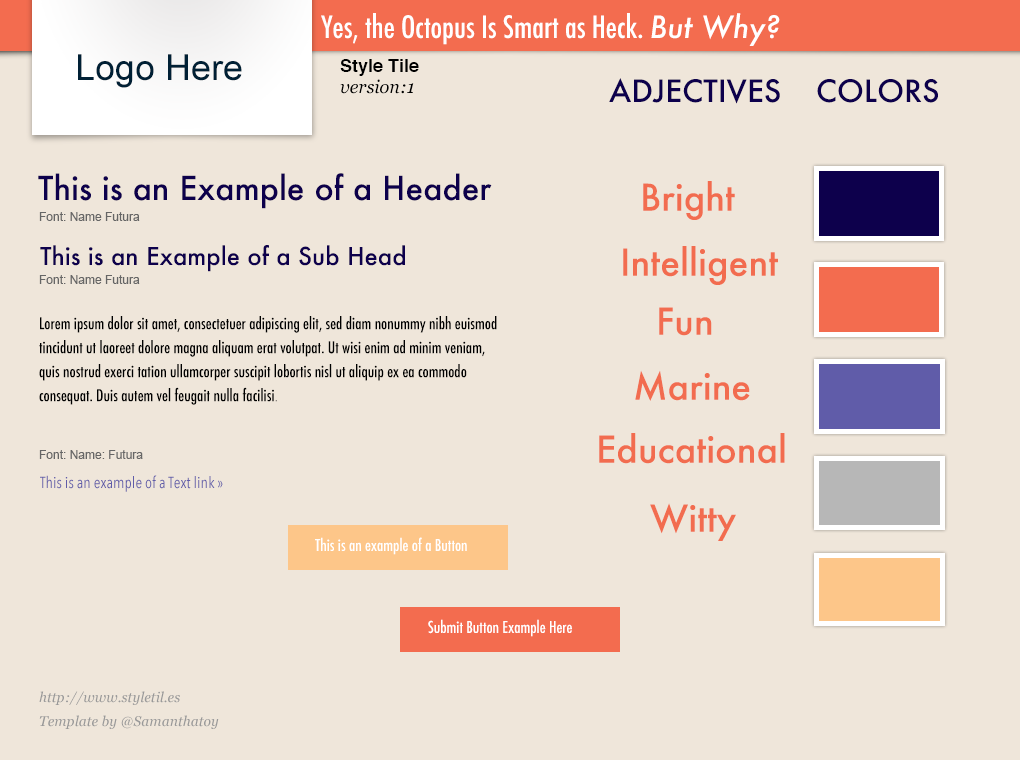
<style>
.page{position:relative;width:1020px;height:760px;background:#efe6da}
.page>*{position:absolute;margin:0}
.t1{font:30px "Futura-CondensedMedium";color:#ffffff}
.t2{font:30px "Futura-MediumItalic";color:#ffffff}
.t3{font:36px "ArialMT";color:#002035}
.t4{font:18px "Helvetica-Bold";color:#000000}
.t5{font:30px "Futura-Medium";color:#0d004c}
.t6{font:18px "Georgia-Italic";color:#000000}
.t7{font:32px "Futura-Medium";color:#0d004c}
.t8{font:36px "Futura-Medium";color:#f26c4f}
.t9{font:12px "ArialMT";color:#666666}
.t10{font:24px "Futura-Medium";color:#0d004c}
.t11{font:16px/24px "Futura-CondensedMedium";color:#000000}
.t12{font:12px/24px "ArialMT";color:#000000}
.t13{font:16px "AvenirNextCondensed-Regular";color:#605ca9}
.t14{font:16px "Futura-CondensedMedium";color:#ffffff}
.t15{font:14px/24px "Georgia-Italic";color:#999999}
</style>
<div class="page">
<p class="t1" style="left:321px;top:13px;width:459px;height:33px">Yes, the Octopus Is Smart as Heck. <span class="t2">But Why?</span></p>
<p class="t3" style="left:78px;top:54px;width:164px;height:34px">Logo Here</p>
<p class="t4" style="left:340px;top:59px;width:79px;height:17px">Style Tile</p>
<p class="t5" style="left:609px;top:78px;width:171px;height:26px">ADJECTIVES</p>
<p class="t6" style="left:340px;top:79px;width:74px;height:15px">version:1</p>
<p class="t5" style="left:817px;top:79px;width:121px;height:24px">COLORS</p>
<p class="t7" style="left:38px;top:173px;width:454px;height:36px">This is an Example of a Header</p>
<p class="t8" style="left:643px;top:181px;width:92px;height:39px">Bright</p>
<p class="t9" style="left:39px;top:212px;width:101px;height:9px">Font: Name Futura</p>
<p class="t10" style="left:40px;top:245px;width:365px;height:27px">This is an Example of a Sub Head</p>
<p class="t8" style="left:623px;top:246px;width:155px;height:39px">Intelligent</p>
<p class="t9" style="left:39px;top:275px;width:101px;height:9px">Font: Name Futura</p>
<p class="t11" style="left:39px;top:316px;width:458px;height:89px">Lorem ipsum dolor sit amet, consectetuer adipiscing elit, sed diam nonummy nibh euismod tincidunt ut laoreet dolore magna aliquam erat volutpat. Ut wisi enim ad minim veniam, quis nostrud exerci tation ullamcorper suscipit lobortis nisl ut aliquip ex ea commodo consequat. Duis autem vel feugait nulla facilisi<span class="t12">.</span></p>
<p class="t8" style="left:659px;top:307px;width:53px;height:29px">Fun</p>
<p class="t8" style="left:635px;top:370px;width:115px;height:31px">Marine</p>
<p class="t8" style="left:599px;top:433px;width:186px;height:31px">Educational</p>
<p class="t9" style="left:39px;top:450px;width:104px;height:9px">Font: Name: Futura</p>
<p class="t13" style="left:40px;top:475px;width:183px;height:17px">This is an example of a Text link »</p>
<p class="t8" style="left:650px;top:503px;width:86px;height:38px">Witty</p>
<p class="t14" style="left:315px;top:537px;width:152px;height:18px">This is an example of a Button</p>
<p class="t14" style="left:428px;top:619px;width:144px;height:18px">Submit Button Example Here</p>
<p class="t15" style="left:39px;top:691px;width:180px;height:38px">http://www.styletil.es<br>Template by @Samanthatoy</p>
</div>
